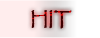
<style>
.page{position:relative;width:100px;height:38px;background:#ffeded}
.page>*{position:absolute;margin:0}
.t1{font:18px "Papyrus-Regular";color:#3d0000;font-weight:bold}
</style>
<div class="page">
<p class="t1" style="left:31px;top:10px;width:41px;height:19px">HIT</p>
</div>
